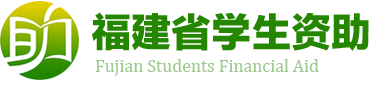
<style>
.page{position:relative;width:386px;height:88px;background:#ffffff}
.page>*{position:absolute;margin:0}
.t1{font:40px "FZLTTHK--GBK1-0";color:#258601}
.t2{font:18px "CambriaMath";color:#9ec98e}
</style>
<div class="page">
<p class="t1" style="left:92px;top:12px;width:277px;height:39px">福建省学生资助</p>
<p class="t2" style="left:95px;top:59px;width:224px;height:17px">Fujian Students Financial Aid</p>
</div>
